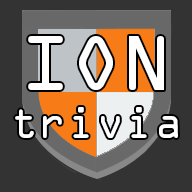
<style>
.page{position:relative;width:192px;height:192px;background:#333333}
.page>*{position:absolute;margin:0}
.t1{font:40px "OCRAStd";color:#ffffff}
.t2{font:70px "OCRAStd";color:#ffffff}
</style>
<div class="page">
<p class="t1" style="left:15px;top:36px;width:163px;height:102px;text-align:center"><span class="t2">ION<br></span>trivia</p>
</div>
